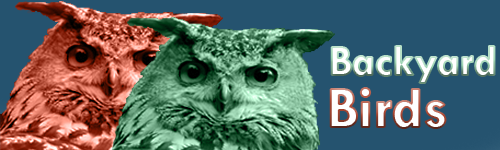
<style>
.page{position:relative;width:500px;height:150px;background:#25536f}
.page>*{position:absolute;margin:0}
.t1{font:43.8px "TwCenMT-Bold";color:#ffffff}
.t2{font:58.9px "TwCenMT-Bold";color:#ffffff}
</style>
<div class="page">
<p class="t1" style="left:331px;top:46px;width:164px;height:37px">Backyard</p>
<p class="t2" style="left:330px;top:88px;width:116px;height:40px">Birds</p>
</div>
